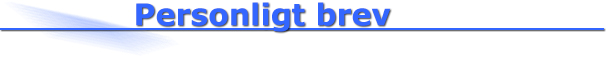
<style>
.page{position:relative;width:606px;height:57px;background:#ffffff}
.page>*{position:absolute;margin:0}
.t1{font:30px "Verdana-Bold";color:#3366ff}
</style>
<div class="page">
<p class="t1" style="left:136px;top:2px;width:255px;height:30px">Personligt brev</p>
</div>
